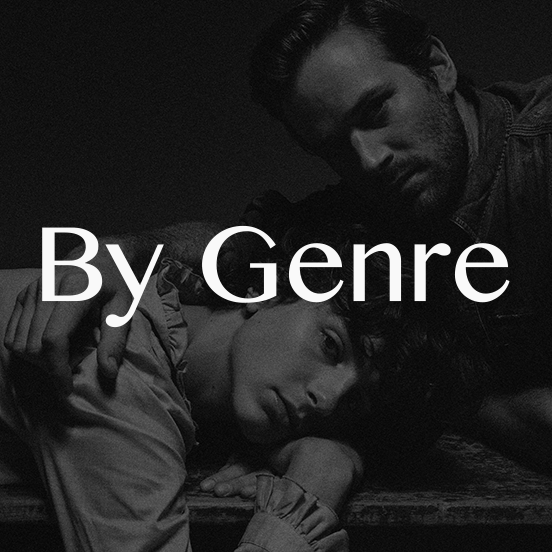
<style>
.page{position:relative;width:552px;height:552px}
.page>*{position:absolute;margin:0}
.t1{font:127.4px "KhmerMN";color:#f9f9f9}
</style>
<div class="page">
<p class="t1" style="left:42px;top:225px;width:468px;height:103px">By Genre</p>
</div>
